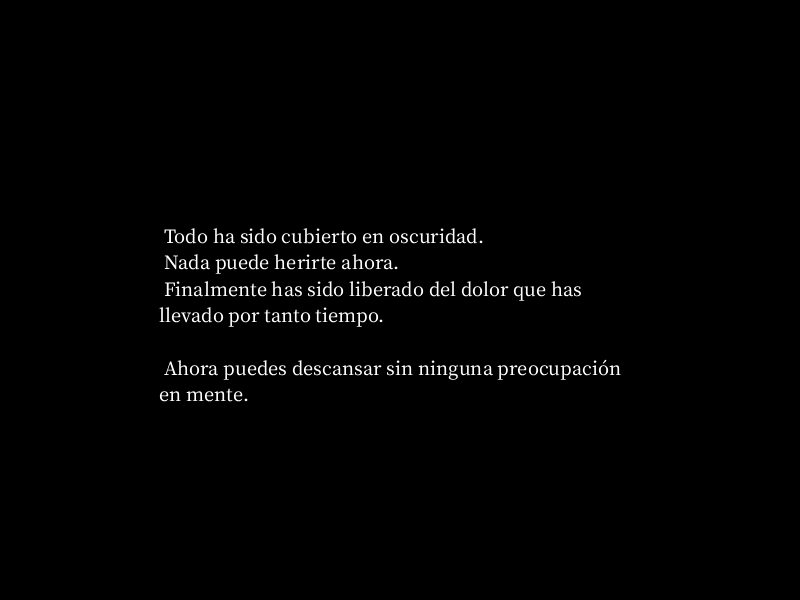
<style>
.page{position:relative;width:800px;height:600px;background:#000000}
.page>*{position:absolute;margin:0}
.t1{font:22px "OfficialFateFont-Medium";color:#ffffff}
</style>
<div class="page">
<p class="t1" style="left:159px;top:228px;width:462px;height:174px">Todo ha sido cubierto en oscuridad.<br> Nada puede herirte ahora.<br> Finalmente has sido liberado del dolor que has llevado por tanto tiempo.<br><br> Ahora puedes descansar sin ninguna preocupación en mente.</p>
</div>
